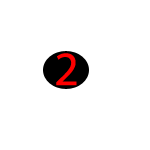
<style>
.page{position:relative;width:150px;height:150px;background:#ffffff}
.page>*{position:absolute;margin:0}
.t1{font:48px "MyriadPro-Regular";color:#fe0000}
</style>
<div class="page">
<p class="t1" style="left:56px;top:53px;width:21px;height:33px">2</p>
</div>
